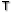
<style>
.page{position:relative;width:12px;height:12px;background:#ffffff}
.page>*{position:absolute;margin:0}
.t1{font:12px "ArialMT";color:#000000}
</style>
<div class="page">
<p class="t1" style="left:2px;top:1px;width:7px;height:9px">T</p>
</div>
